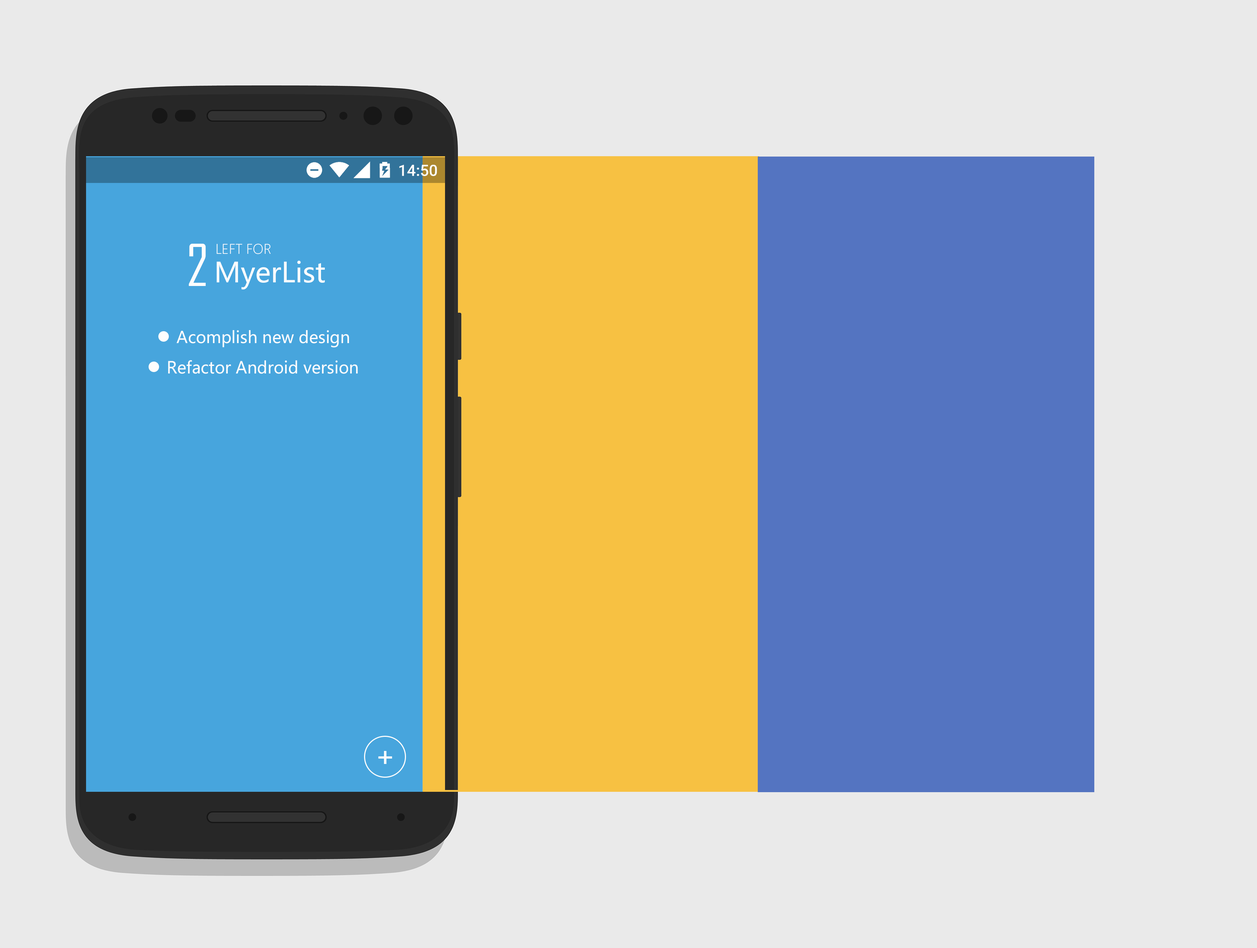
<style>
.page{position:relative;width:1257px;height:948px;background:#eaeaea}
.page>*{position:absolute;margin:0}
.t1{font:55.4px "AgencyFB-Reg";color:#fdfdfd}
.t2{font:13px "MicrosoftYaHeiLight";color:#fdfdfd}
.t3{font:27.4px "MicrosoftYaHei";color:#fdfdfd}
.t4{font:16.3px "MicrosoftYaHei";color:#fdfdfd}
.t5{font:16.4px "MicrosoftYaHei";color:#fdfdfd}
.t6{font:39.7px "AgencyFB-Reg";color:#fdfdfd}
</style>
<div class="page">
<p class="t1" style="left:189px;top:244px;width:17px;height:42px">2</p>
<p class="t2" style="left:217px;top:244px;width:54px;height:10px">LEFT FOR</p>
<p class="t3" style="left:217px;top:261px;width:108px;height:29px">MyerList</p>
<p class="t4" style="left:176px;top:330px;width:173px;height:18px">Acomplish new design</p>
<p class="t5" style="left:168px;top:360px;width:190px;height:14px">Refactor Android version</p>
<p class="t6" style="left:378px;top:751px;width:14px;height:13px">+</p>
</div>
